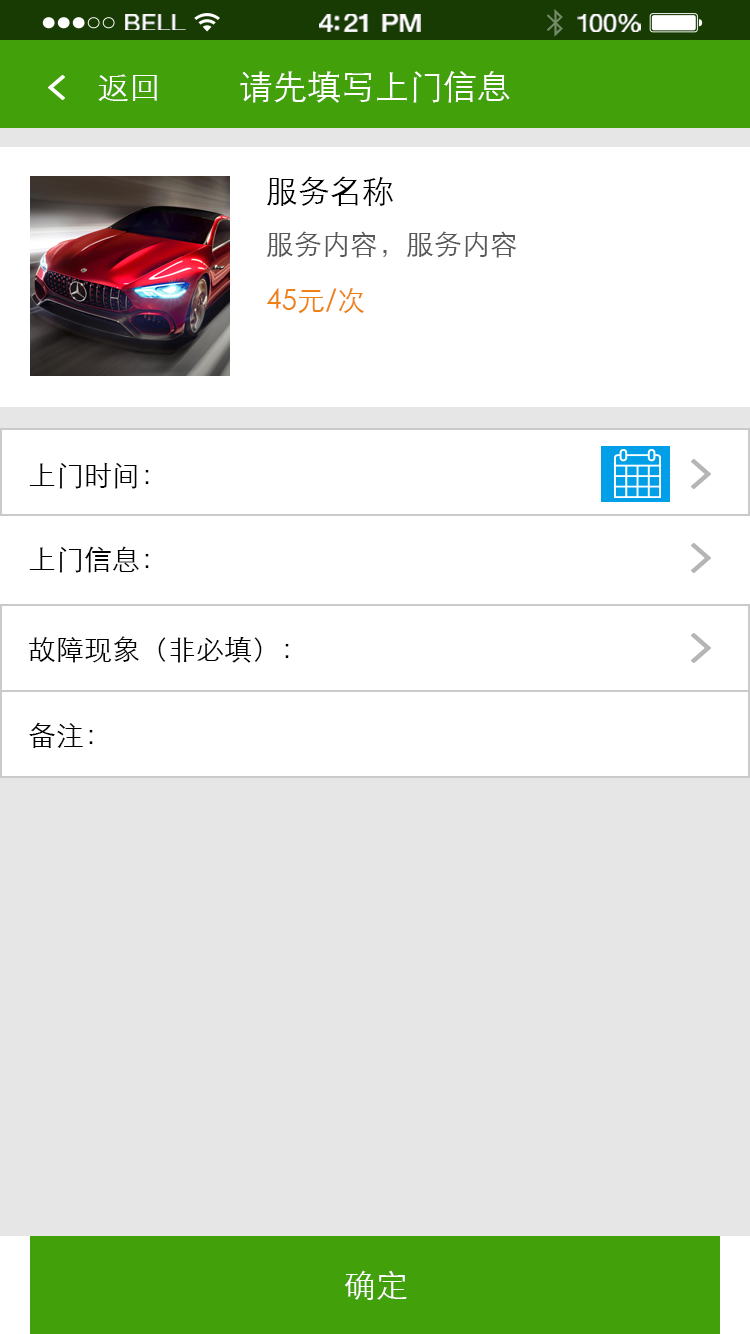
<style>
.page{position:relative;width:750px;height:1334px;background:#ffffff}
.page>*{position:absolute;margin:0}
.t1{font:23.3px "HelveticaNeue";letter-spacing:0.02em;color:#ffffff;scale:1.06 1}
.t2{font:25.3px "HelveticaNeue-Medium";letter-spacing:-0.02em;color:#ffffff;scale:1.06 1}
.t3{font:24.3px "HelveticaNeue";letter-spacing:-0.02em;color:#ffffff;scale:1.06 1}
.t4{font:32px "STXihei";color:#ffffff}
.t5{font:34px "STXihei";color:#ffffff}
.t6{font:28px/56px "STXihei";color:#595757}
.t7{font:32px/56px "STXihei";color:#000000}
.t8{font:28px/56px "STXihei";color:#ef8013}
.t9{font:28px "STXihei";color:#000000}
</style>
<div class="page">
<p class="t1" style="left:125px;top:14px;width:61px;height:16px">BELL</p>
<p class="t2" style="left:319px;top:14px;width:102px;height:18px">4:21 PM</p>
<p class="t3" style="left:577px;top:14px;width:64px;height:18px">100%</p>
<p class="t4" style="left:98px;top:74px;width:59px;height:27px">返回</p>
<p class="t5" style="left:240px;top:71px;width:270px;height:32px">请先填写上门信息</p>
<p class="t6" style="left:266px;top:176px;width:251px;height:138px"><span class="t7">服务名称<br></span>服务内容，服务内容<br><span class="t8">45元/次</span></p>
<p class="t9" style="left:29px;top:462px;width:120px;height:27px">上门时间：</p>
<p class="t9" style="left:29px;top:546px;width:120px;height:27px">上门信息：</p>
<p class="t9" style="left:29px;top:636px;width:260px;height:27px">故障现象（非必填）：</p>
<p class="t9" style="left:29px;top:722px;width:64px;height:26px">备注：</p>
<p class="t4" style="left:344px;top:1270px;width:63px;height:30px">确定</p>
</div>
